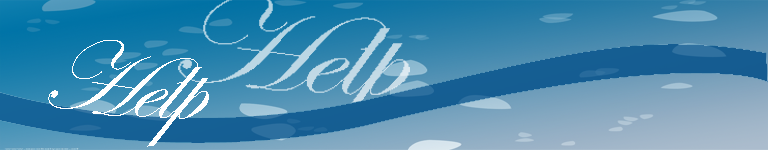
<style>
.page{position:relative;width:768px;height:150px}
.page>*{position:absolute;margin:0}
.t1{font:106.2px "EdwardianScriptITC";color:#ffffff;font-style:italic}
</style>
<div class="page">
<p class="t1" style="left:48px;top:40px;width:161px;height:107px">Help</p>
</div>
